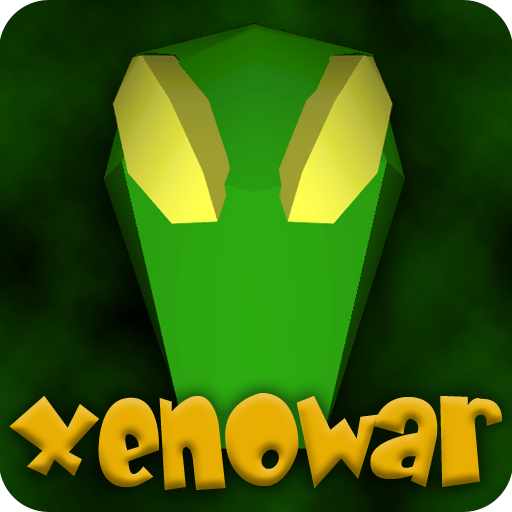
<style>
.page{position:relative;width:512px;height:512px}
.page>*{position:absolute;margin:0}
.t1{font:110px "BabyKruffy";letter-spacing:0.05em;color:#e8ae02}
</style>
<div class="page">
<p class="t1" style="left:9px;top:393px;width:493px;height:97px">Xenowar</p>
</div>
